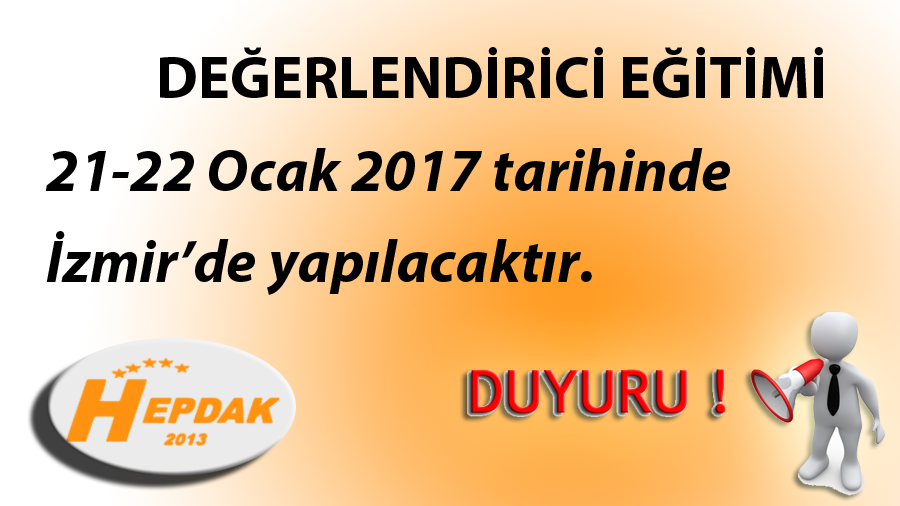
<style>
.page{position:relative;width:900px;height:506px}
.page>*{position:absolute;margin:0}
.t1{font:60px/51.6px "MyriadPro-BoldIt";color:#000000}
.t2{font:60px/35.6px "MyriadPro-Bold";color:#000000}
.t3{font:60px/41.6px "MyriadPro-Bold";color:#000000}
.t4{font:60px/45.6px "MyriadPro-BoldIt";color:#000000}
</style>
<div class="page">
<p class="t1" style="left:45px;top:47px;width:778px;height:248px;text-align:center"><span class="t2">DEĞ</span><span class="t3">ERLENDİRİCİ EĞİTİMİ<br><br></span>21-22 Ocak 2017 tarihinde<br><span class="t4"><br>İzmir’de yapılacaktır.</span></p>
</div>
